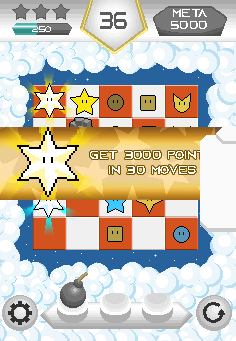
<style>
.page{position:relative;width:236px;height:341px}
.page>*{position:absolute;margin:0}
.t1{font:24.4px "AzonixRegular";color:#5c5c5c;scale:0.76 1}
.t2{font:12px "AzonixRegular";color:#ffffff}
.t3{font:8px "AzonixRegular";color:#ffffff}
</style>
<div class="page">
<p class="t1" style="left:100px;top:12px;width:27px;height:17px">36</p>
<p class="t2" style="left:173px;top:9px;width:34px;height:8px">Meta</p>
<p class="t3" style="left:32px;top:26px;width:19px;height:6px">250</p>
<p class="t2" style="left:171px;top:21px;width:36px;height:8px">5000</p>
<p class="t2" style="left:90px;top:151px;width:125px;height:23px;text-align:center">Get 3000 points<br>in 30 moves</p>
</div>
